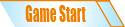
<style>
.page{position:relative;width:125px;height:27px}
.page>*{position:absolute;margin:0}
.t1{font:20.8px "Impact";color:#ec7f00;scale:0.64 1}
</style>
<div class="page">
<p class="t1" style="left:25px;top:5px;width:61px;height:17px">Game Start</p>
</div>
